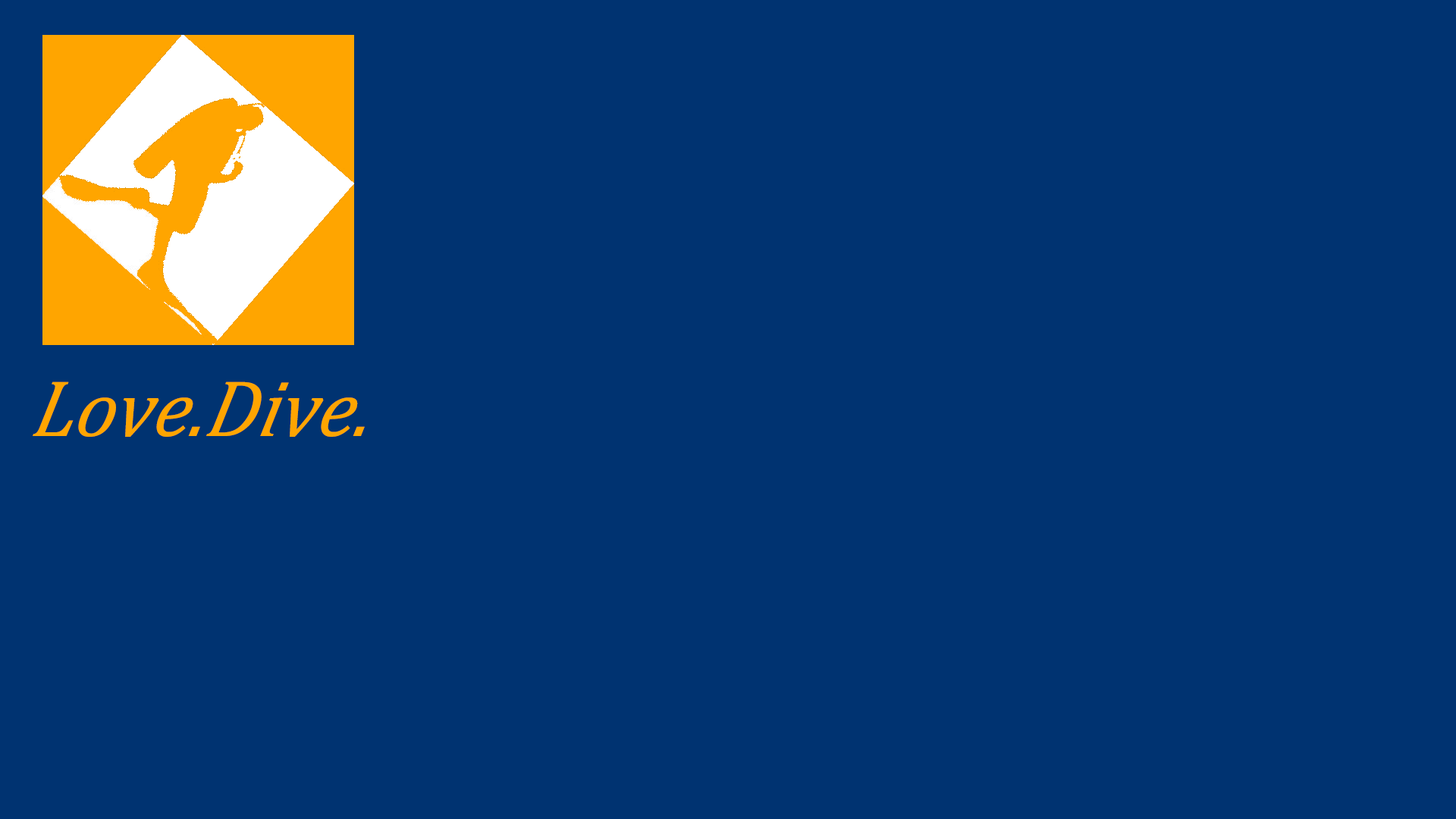
<style>
.page{position:relative;width:1456px;height:819px;background:#003371}
.page>*{position:absolute;margin:0}
.t1{font:80.9px "Cambria-Italic";color:#ffa500;font-style:italic}
</style>
<div class="page">
<p class="t1" style="left:33px;top:381px;width:332px;height:56px">Love.Dive.</p>
</div>
